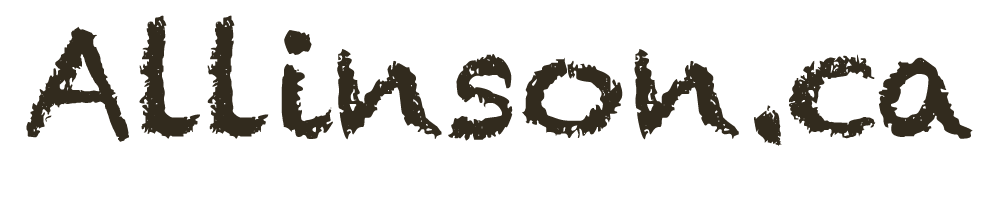
<style>
.page{position:relative;width:1000px;height:200px;background:#ffffff}
.page>*{position:absolute;margin:0}
.t1{font:150px "Chalkduster";color:#322b1e}
</style>
<div class="page">
<p class="t1" style="left:26px;top:15px;width:947px;height:131px">Allinson.ca</p>
</div>
